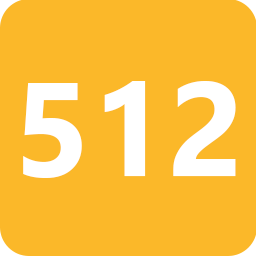
<style>
.page{position:relative;width:256px;height:256px;background:#fbb829}
.page>*{position:absolute;margin:0}
.t1{font:133.3px "LeelawadeeUI-Bold";color:#ffffff}
</style>
<div class="page">
<p class="t1" style="left:23px;top:81px;width:213px;height:97px">512</p>
</div>
